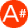
<style>
.page{position:relative;width:28px;height:28px;background:#fd3702}
.page>*{position:absolute;margin:0}
.t1{font:24px "Aan55";color:#fdfdfd}
.t2{font:12px "Aan55";color:#fdfdfd}
</style>
<div class="page">
<p class="t1" style="left:2px;top:5px;width:18px;height:17px">A</p>
<p class="t2" style="left:19px;top:9px;width:8px;height:9px">#</p>
</div>
